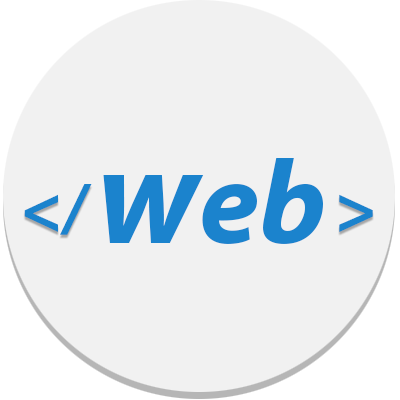
<style>
.page{position:relative;width:400px;height:400px;background:#f1f1f1}
.page>*{position:absolute;margin:0}
.t1{font:120px "MyriadPro-BoldIt";color:#1b83cd}
.t2{font:70px "MyriadPro-BoldIt";color:#1b83cd}
.t3{font:140px "MyriadPro-BoldIt";color:#1b83cd}
</style>
<div class="page">
<p class="t1" style="left:103px;top:158px;width:220px;height:86px"><span class="t2">     </span><span class="t3">w</span>eb</p>
</div>
